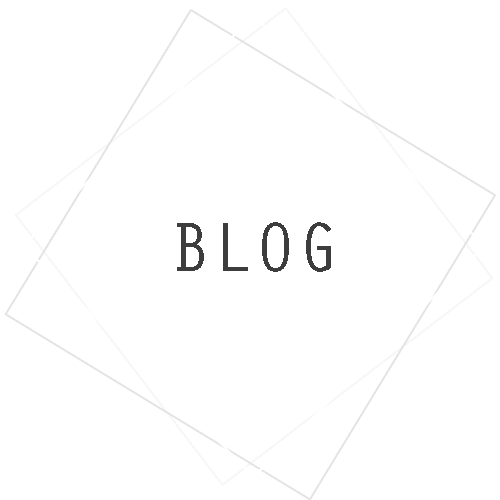
<style>
.page{position:relative;width:500px;height:500px;background:#ffffff}
.page>*{position:absolute;margin:0}
.t1{font:72px "OratorStd";color:#3d3d3d}
</style>
<div class="page">
<p class="t1" style="left:177px;top:222px;width:154px;height:50px">BLOG</p>
</div>
